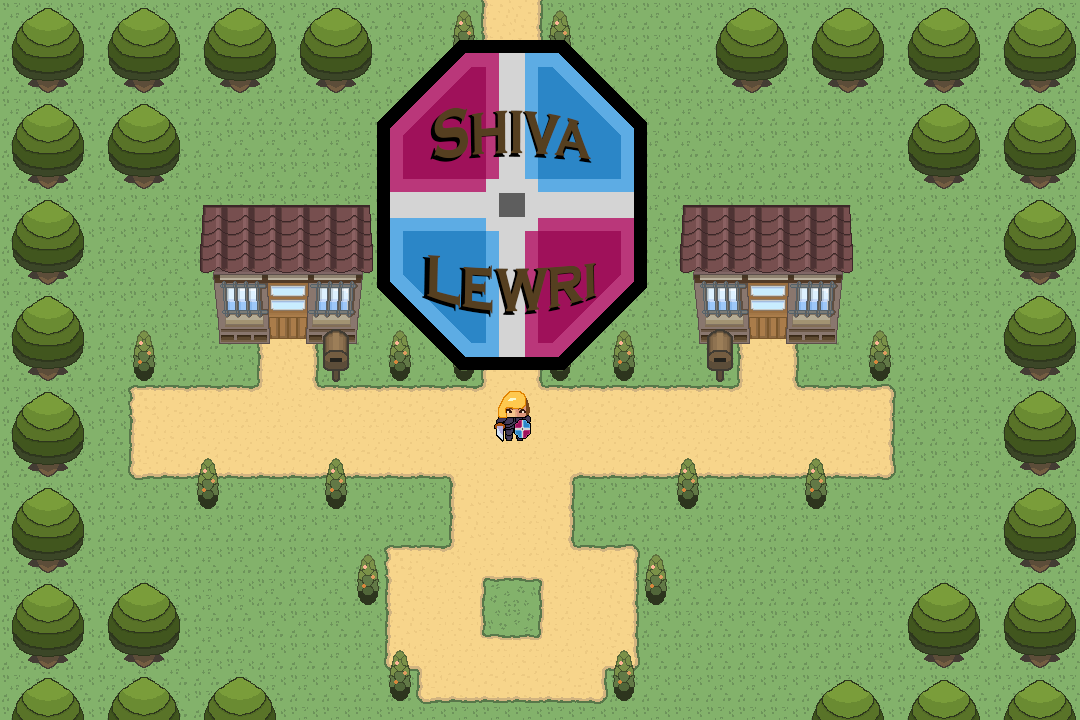
<style>
.page{position:relative;width:1080px;height:720px;background:#83b26b}
.page>*{position:absolute;margin:0}
.t1{font:54px "CopperplateGothic-Bold"}
.t2{font:52px "CopperplateGothic-Bold";color:#553f20}
</style>
<div class="page">
<p class="t1" style="left:430px;top:110px;width:162px;height:53px">Shiva</p>
<p class="t2" style="left:434px;top:107px;width:157px;height:53px">Shiva</p>
<p class="t1" style="left:422px;top:256px;width:175px;height:62px">Lewri</p>
<p class="t2" style="left:427px;top:255px;width:169px;height:59px">Lewri</p>
</div>
